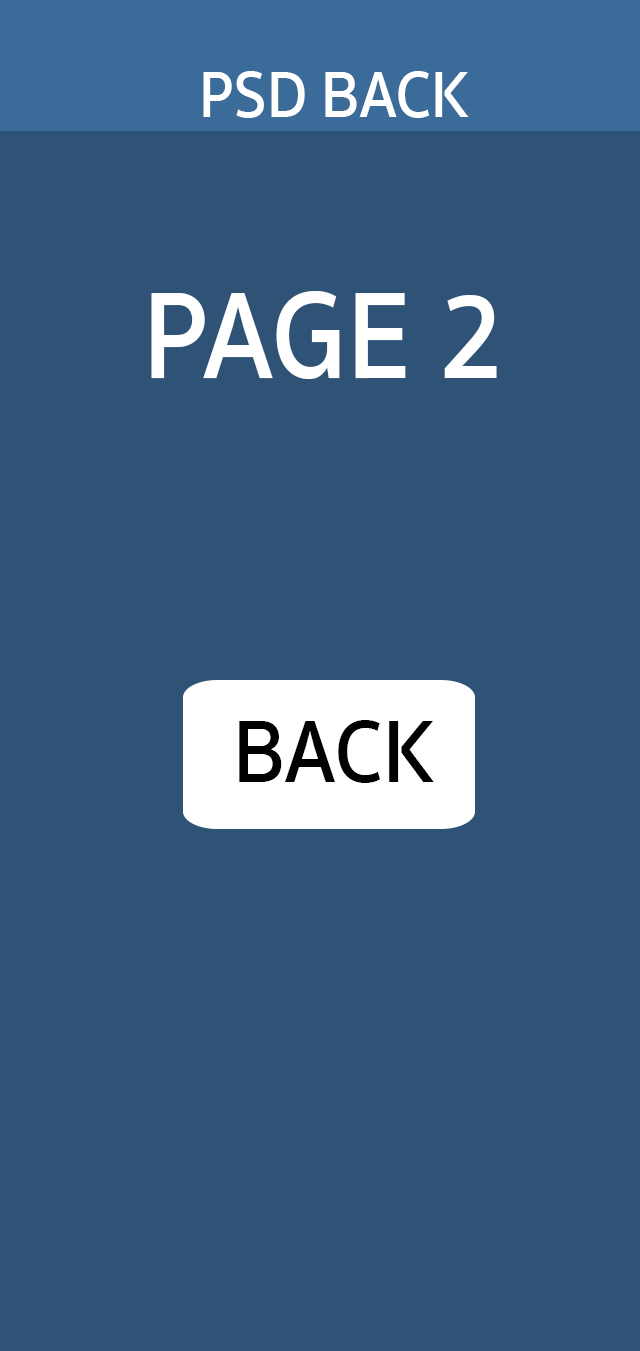
<style>
.page{position:relative;width:640px;height:1351px;background:#2e5376}
.page>*{position:absolute;margin:0}
.t1{font:66.6px "SukhumvitSet-SemiBold";color:#ffffff;scale:0.91 1}
.t2{font:125.8px "SukhumvitSet-SemiBold";color:#ffffff;scale:0.91 1}
.t3{font:90.7px "SukhumvitSet-SemiBold";color:#010101;scale:0.91 1}
</style>
<div class="page">
<p class="t1" style="left:203px;top:71px;width:266px;height:47px">PSD BACK</p>
<p class="t2" style="left:151px;top:291px;width:346px;height:88px">PAGE 2</p>
<p class="t3" style="left:239px;top:720px;width:195px;height:63px">BACK</p>
</div>
